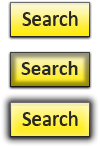
<style>
.page{position:relative;width:100px;height:146px}
.page>*{position:absolute;margin:0}
.t1{font:20.8px "Calibri";color:#282828}
.t2{font:20.8px "Calibri-Bold";color:#282828}
</style>
<div class="page">
<p class="t1" style="left:22px;top:11px;width:56px;height:14px">Search</p>
<p class="t2" style="left:21px;top:61px;width:57px;height:14px">Search</p>
<p class="t1" style="left:22px;top:111px;width:56px;height:14px">Search</p>
</div>
